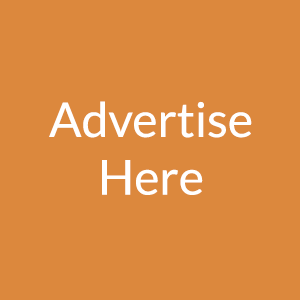
<style>
.page{position:relative;width:300px;height:300px;background:#dc883d}
.page>*{position:absolute;margin:0}
.t1{font:48px "Lato-Regular";color:#ffffff}
</style>
<div class="page">
<p class="t1" style="left:49px;top:101px;width:203px;height:94px;text-align:center">Advertise<br>Here</p>
</div>
